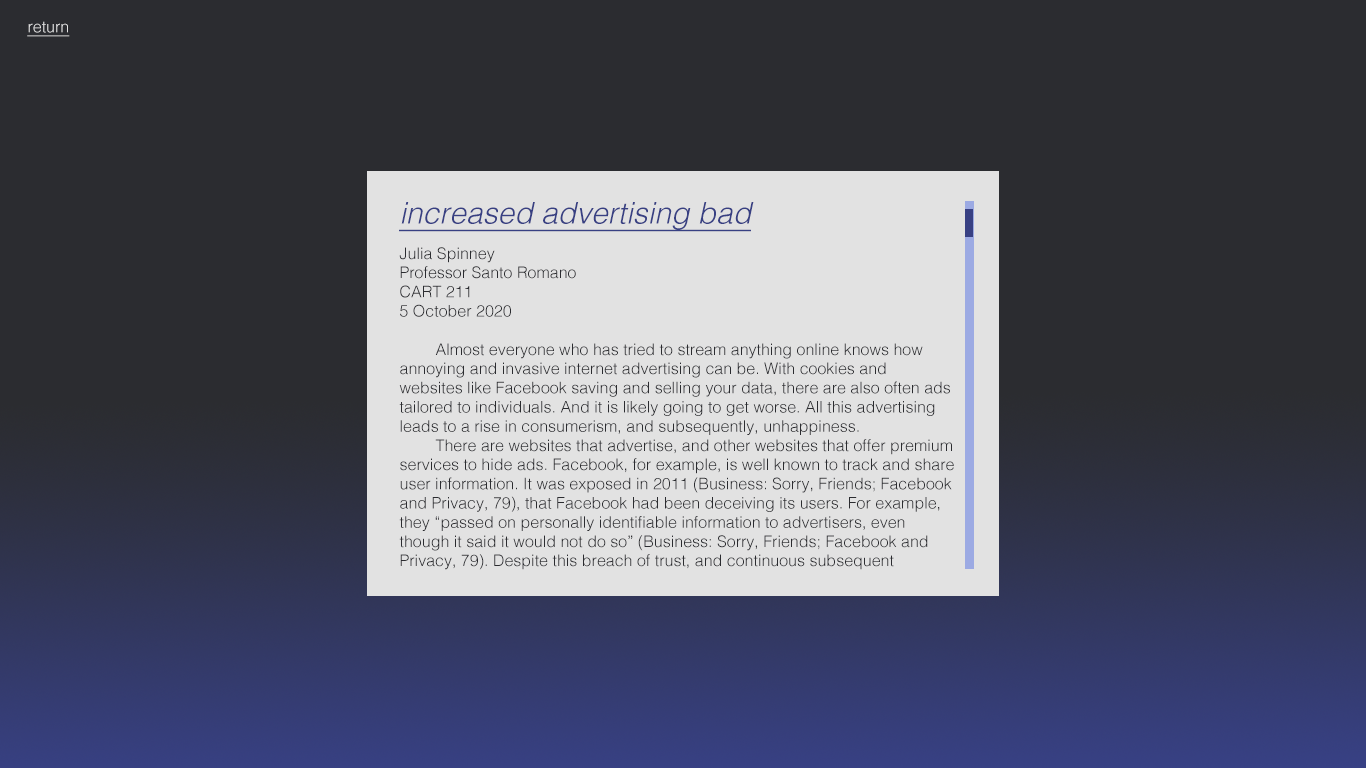
<style>
.page{position:relative;width:1366px;height:768px;background:#2b2c30}
.page>*{position:absolute;margin:0}
.t1{font:16px "Helvetica-Light";color:#e2e2e2;text-decoration:underline}
.t2{font:30px "Helvetica-LightOblique";color:#384083;text-decoration:underline}
.t3{font:16px "Helvetica-Light";color:#2b2c30}
</style>
<div class="page">
<p class="t1" style="left:27px;top:21px;width:43px;height:16px">return</p>
<p class="t2" style="left:399px;top:202px;width:355px;height:30px">increased advertising bad</p>
<p class="t3" style="left:399px;top:247px;width:555px;height:323px">Julia Spinney<br>Professor Santo Romano<br>CART 211<br>5 October 2020<br><br> Almost everyone who has tried to stream anything online knows how<br>annoying and invasive internet advertising can be. With cookies and<br>websites like Facebook saving and selling your data, there are also often ads<br>tailored to individuals. And it is likely going to get worse. All this advertising<br>leads to a rise in consumerism, and subsequently, unhappiness.<br> There are websites that advertise, and other websites that offer premium<br>services to hide ads. Facebook, for example, is well known to track and share<br>user information. It was exposed in 2011 (Business: Sorry, Friends; Facebook<br>and Privacy, 79), that Facebook had been deceiving its users. For example,<br>they “passed on personally identifiable information to advertisers, even<br>though it said it would not do so” (Business: Sorry, Friends; Facebook and<br>Privacy, 79). Despite this breach of trust, and continuous subsequent</p>
</div>
